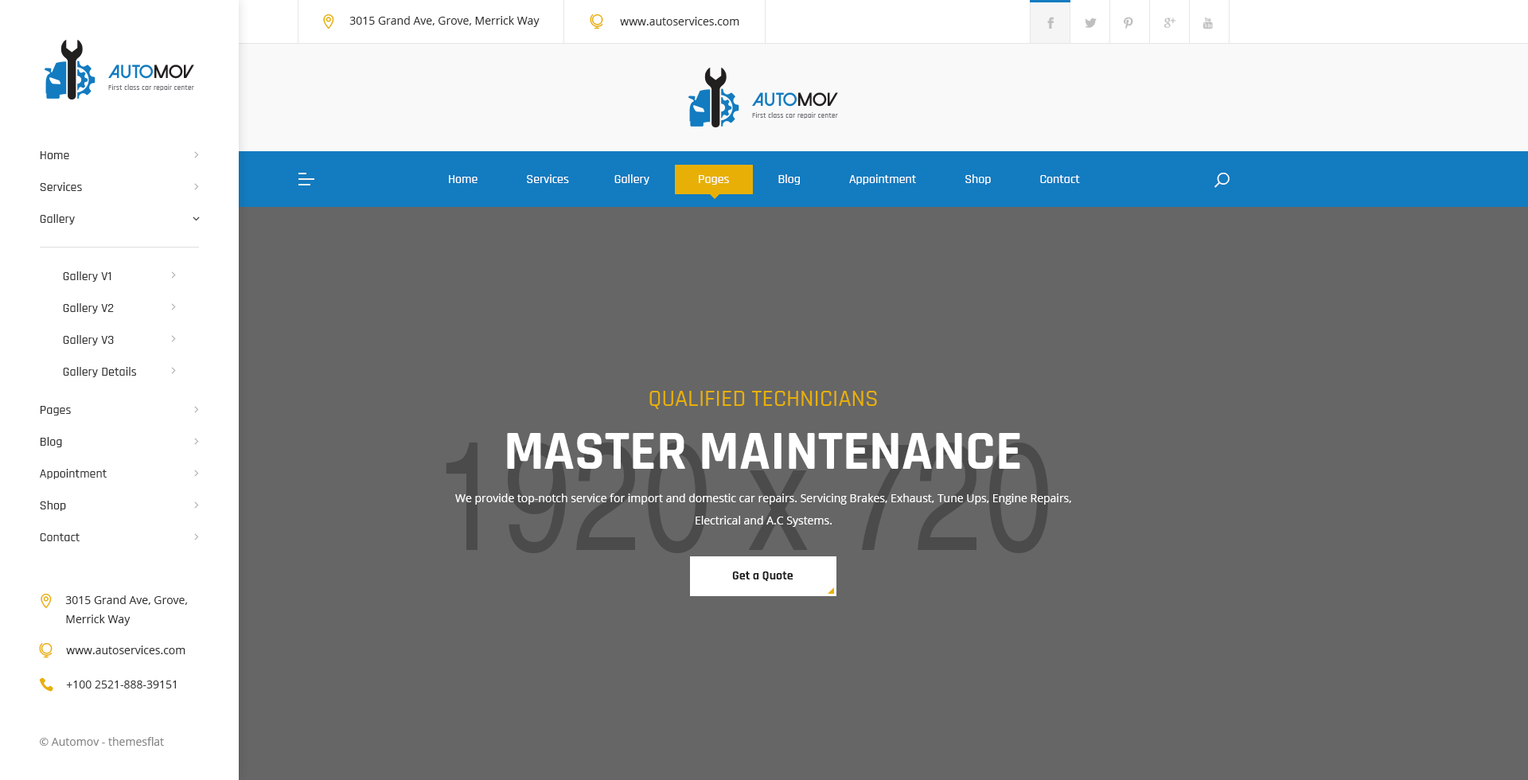
<style>
.page{position:relative;width:1528px;height:780px;background:#666666}
.page>*{position:absolute;margin:0}
.t1{font:11.1px "OpenSans";color:#343434}
.t2{font:12.7px/31.8px "Rajdhani-Medium";color:#343434}
.t3{font:12.7px "Rajdhani-Medium";color:#ffffff}
.t4{font:23.9px "Rajdhani-Medium";color:#e8b006;text-transform:uppercase}
.t5{font:55.7px "Rajdhani-Bold";color:#ffffff;text-transform:uppercase}
.t6{font:11.1px/22.3px "OpenSans";color:#ffffff}
.t7{font:12.7px "Rajdhani-Bold";color:#221f1f}
.t8{font:11.1px/19.1px "OpenSans";color:#343434}
.t9{font:11.1px "OpenSans";color:#363636}
.t10{font:11.1px "OpenSans";color:#868686}
</style>
<div class="page">
<p class="t1" style="left:349px;top:16px;width:191px;height:11px">3015 Grand Ave, Grove, Merrick Way</p>
<p class="t1" style="left:620px;top:17px;width:120px;height:8px">www.autoservices.com</p>
<p class="t2" style="left:40px;top:151px;width:67px;height:390px">Home               <br>Services              <br>Gallery<br><br><br><br><br>         <br>Pages               <br>Blog               <br>Appointment               <br>Shop               <br>Contact</p>
<p class="t3" style="left:449px;top:174px;width:631px;height:11px">Home               Services              Gallery               Pages               Blog               Appointment               Shop               Contact</p>
<p class="t2" style="left:63px;top:271px;width:73px;height:106px">Gallery V1<br>Gallery V2<br>Gallery V3<br>Gallery Details</p>
<p class="t4" style="left:650px;top:391px;width:227px;height:18px">Qualified technicians</p>
<p class="t5" style="left:507px;top:433px;width:514px;height:36px">Master maintenance</p>
<p class="t6" style="left:455px;top:494px;width:617px;height:33px;text-align:center">We provide top-notch service for import and domestic car repairs. Servicing Brakes, Exhaust, Tune Ups, Engine Repairs, <br>Electrical and A.C Systems.</p>
<p class="t7" style="left:732px;top:572px;width:62px;height:9px">Get a Quote</p>
<p class="t8" style="left:65px;top:595px;width:123px;height:31px">3015 Grand Ave, Grove, <br>Merrick Way</p>
<p class="t1" style="left:66px;top:646px;width:119px;height:8px">www.autoservices.com</p>
<p class="t9" style="left:66px;top:681px;width:110px;height:8px">+100 2521-888-39151</p>
<p class="t10" style="left:40px;top:737px;width:124px;height:9px">© Automov - themesflat</p>
</div>
